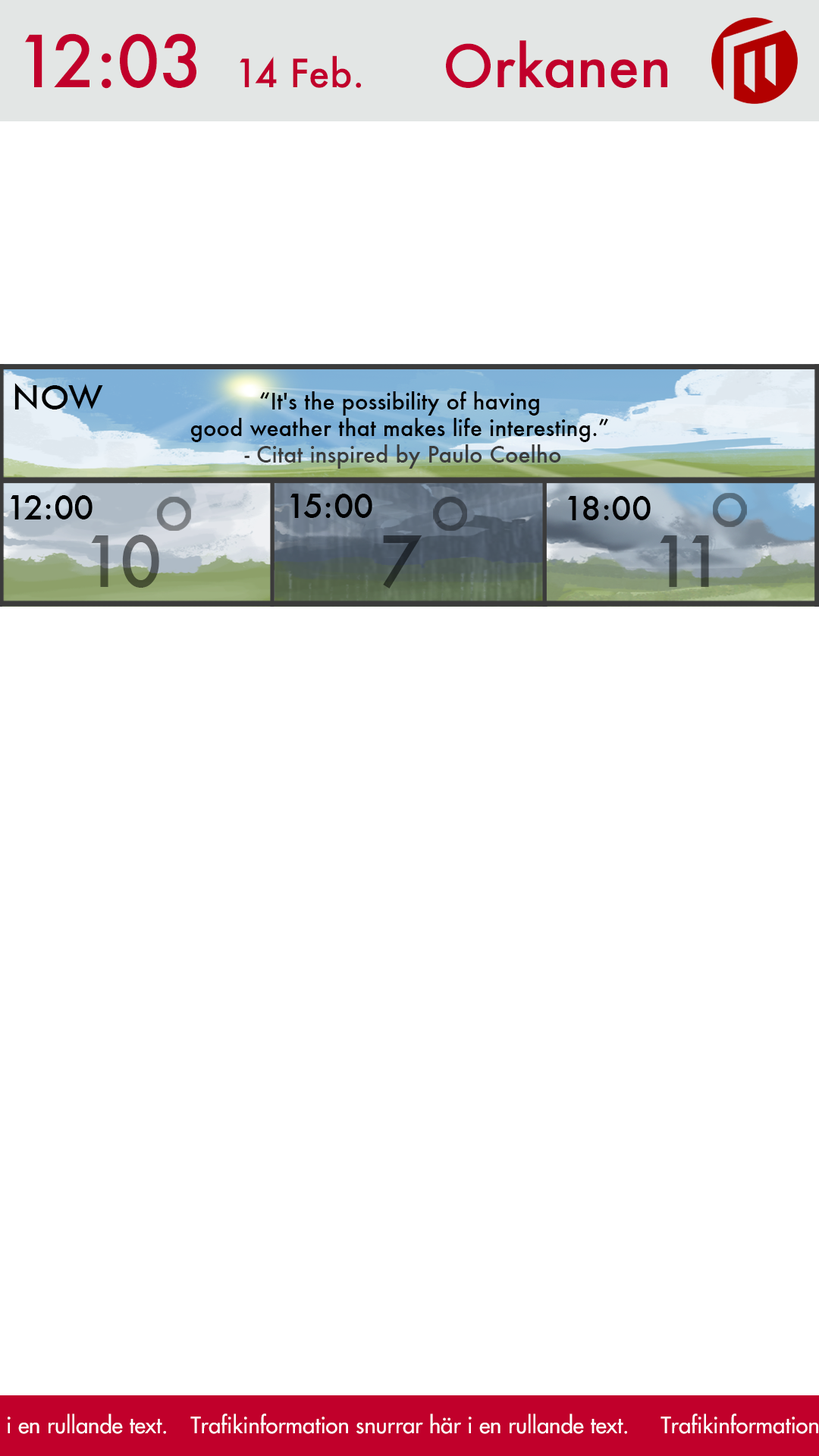
<style>
.page{position:relative;width:819px;height:1456px;background:#ffffff}
.page>*{position:absolute;margin:0}
.t1{font:69.5px "Futura-Medium";color:#c1002b}
.t2{font:56.9px "Futura-Medium";color:#c1002b}
.t3{font:37.9px "Futura-Medium";color:#c1002b}
.t4{font:32.8px "Futura-Medium";color:#000000}
.t5{font:22.1px "Futura-Medium";color:#000000}
.t6{font:22.1px "Futura-Medium";color:#3b3b3b}
.t7{font:68.2px "Futura-Medium"}
.t8{font:22.1px "FuturaLT";color:#ffffff}
</style>
<div class="page">
<p class="t1" style="left:25px;top:33px;width:171px;height:56px">12:03</p>
<p class="t2" style="left:446px;top:40px;width:221px;height:48px">Orkanen</p>
<p class="t3" style="left:240px;top:55px;width:121px;height:33px">14 Feb.</p>
<p class="t4" style="left:14px;top:383px;width:89px;height:26px">NOW</p>
<p class="t5" style="left:190px;top:391px;width:418px;height:78px;text-align:center">“It's the possibility of having <br>good weather that makes life interesting.”<br><span class="t6"> - Citat inspired by Paulo Coelho</span></p>
<p class="t4" style="left:11px;top:495px;width:82px;height:24px">12:00</p>
<p class="t4" style="left:290px;top:494px;width:82px;height:24px">15:00</p>
<p class="t4" style="left:568px;top:496px;width:83px;height:24px">18:00</p>
<p class="t7" style="left:91px;top:535px;width:618px;height:53px">10         7          11</p>
<p class="t8" style="left:190px;top:1414px;width:437px;height:20px">Trafikinformation snurrar här i en rullande text.</p>
</div>
